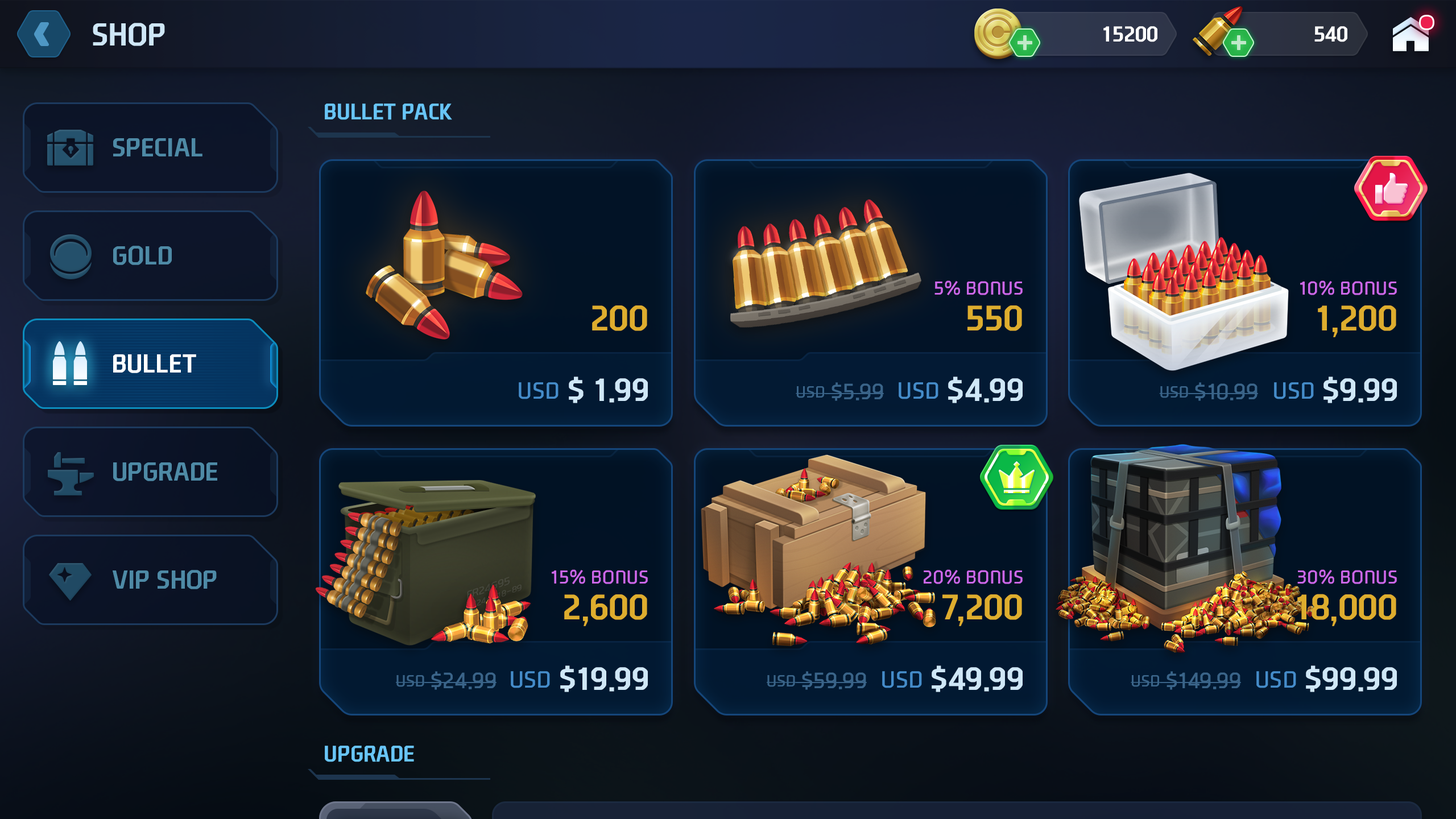
<style>
.page{position:relative;width:1456px;height:819px}
.page>*{position:absolute;margin:0}
.t1{font:30.6px "NEXONFootballGothicB";color:#cfe7f7;text-transform:uppercase}
.t2{font:20.7px "NEXONFootballGothicB";color:#ffffff;text-transform:uppercase}
.t3{font:21.6px "NEXONFootballGothicB";color:#68c5f7;text-transform:uppercase}
.t4{font:25px "NEXONFootballGothicB";color:#4e8aa6;text-transform:uppercase}
.t5{font:18.2px "NEXONFootballGothicL";color:#cc67e9;text-transform:uppercase}
.t6{font:34.1px "NEXONFootballGothicB";color:#dead2e}
.t7{font:25px "NEXONFootballGothicB";color:#ffffff;text-transform:uppercase}
.t8{font:30.7px "NEXONFootballGothicB";color:#cfe7f7}
.t9{font:22.7px "NEXONFootballGothicL";color:#458cca}
.t10{font:21.5px "NEXONFootballGothicL";color:#3a6489}
.t11{font:15.9px "NEXONFootballGothicL";color:#3a6489}
</style>
<div class="page">
<p class="t1" style="left:93px;top:23px;width:72px;height:23px">shop</p>
<p class="t2" style="left:1103px;top:26px;width:54px;height:16px">15200</p>
<p class="t2" style="left:1314px;top:26px;width:33px;height:16px">540</p>
<p class="t3" style="left:325px;top:104px;width:127px;height:16px">Bullet Pack</p>
<p class="t4" style="left:113px;top:138px;width:89px;height:18px">Special</p>
<p class="t4" style="left:113px;top:246px;width:59px;height:19px">Gold</p>
<p class="t5" style="left:934px;top:280px;width:89px;height:15px">5% Bonus</p>
<p class="t5" style="left:1300px;top:280px;width:97px;height:15px">10% Bonus</p>
<p class="t6" style="left:592px;top:305px;width:55px;height:26px">200</p>
<p class="t6" style="left:967px;top:305px;width:55px;height:26px">550</p>
<p class="t6" style="left:1318px;top:305px;width:78px;height:32px">1,200</p>
<p class="t7" style="left:113px;top:354px;width:83px;height:19px">Bullet</p>
<p class="t7" style="left:113px;top:354px;width:83px;height:19px">Bullet</p>
<p class="t8" style="left:519px;top:377px;width:129px;height:26px"><span class="t9">USD</span> $ 1.99</p>
<p class="t8" style="left:899px;top:377px;width:124px;height:26px"><span class="t9">USD</span> $4.99</p>
<p class="t8" style="left:1274px;top:377px;width:123px;height:26px"><span class="t9">USD</span> $9.99</p>
<p class="t10" style="left:796px;top:382px;width:88px;height:19px"><span class="t11">USD</span> $5.99</p>
<p class="t10" style="left:1159px;top:382px;width:99px;height:19px"><span class="t11">USD</span> $10.99</p>
<p class="t4" style="left:113px;top:462px;width:104px;height:19px">Upgrade</p>
<p class="t4" style="left:113px;top:570px;width:104px;height:19px">VIP Shop</p>
<p class="t5" style="left:552px;top:569px;width:96px;height:15px">15% Bonus</p>
<p class="t5" style="left:924px;top:569px;width:99px;height:15px">20% Bonus</p>
<p class="t5" style="left:1297px;top:569px;width:100px;height:15px">30% Bonus</p>
<p class="t6" style="left:1297px;top:594px;width:99px;height:32px">18,000</p>
<p class="t6" style="left:564px;top:594px;width:83px;height:32px">2,600</p>
<p class="t6" style="left:942px;top:594px;width:80px;height:32px">7,200</p>
<p class="t8" style="left:511px;top:665px;width:137px;height:27px"><span class="t9">USD</span> $19.99</p>
<p class="t8" style="left:882px;top:665px;width:141px;height:27px"><span class="t9">USD</span> $49.99</p>
<p class="t8" style="left:1256px;top:665px;width:141px;height:27px"><span class="t9">USD</span> $99.99</p>
<p class="t10" style="left:396px;top:671px;width:101px;height:19px"><span class="t11">USD</span> $24.99</p>
<p class="t10" style="left:767px;top:671px;width:100px;height:19px"><span class="t11">USD</span> $59.99</p>
<p class="t10" style="left:1131px;top:671px;width:110px;height:19px"><span class="t11">USD</span> $149.99</p>
<p class="t3" style="left:325px;top:746px;width:89px;height:16px">Upgrade</p>
</div>
